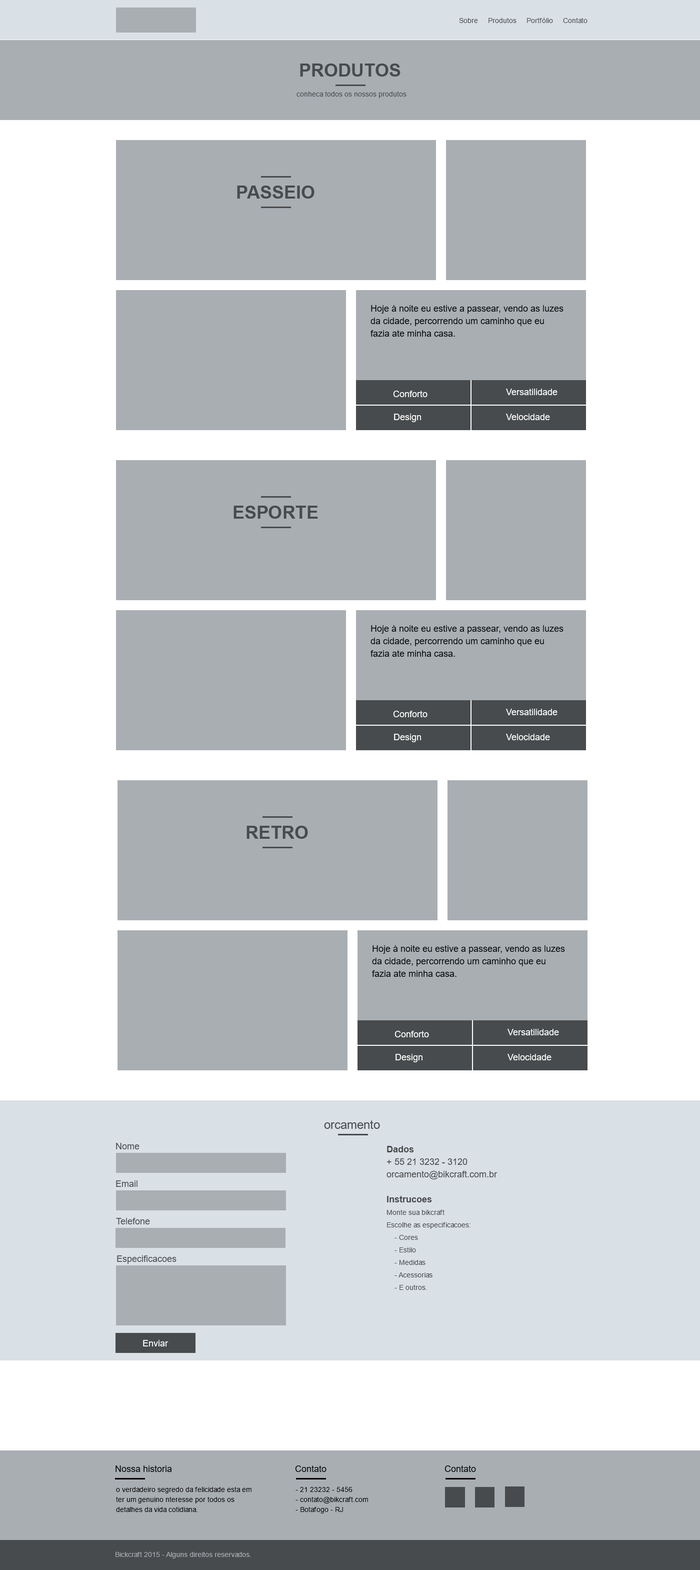
<style>
.page{position:relative;width:700px;height:1570px;background:#a9aeb3}
.page>*{position:absolute;margin:0}
.t1{font:7px "ArialMT";color:#484b4d}
.t2{font:18px "Arial-BoldMT";color:#484b4d;text-transform:uppercase}
.t3{font:9px/12.5px "ArialMT";color:#000204}
.t4{font:9px "ArialMT";color:#ffffff}
.t5{font:12px "ArialMT";color:#484b4d}
.t6{font:9px "ArialMT";color:#484b4d}
.t7{font:7px/12.5px "ArialMT";color:#484b4d}
.t8{font:9px/12.5px "Arial-BoldMT";color:#484b4d}
.t9{font:9px/12.5px "ArialMT";color:#484b4d}
.t10{font:9px "ArialMT";color:#000101}
.t11{font:7px/10px "ArialMT";color:#000000}
.t12{font:7px "ArialMT";color:#a9aeb3}
</style>
<div class="page">
<p class="t1" style="left:459px;top:18px;width:129px;height:5px">Sobre     Produtos     Portfólio     Contato</p>
<p class="t2" style="left:300px;top:64px;width:100px;height:12px">PRODUTOS</p>
<p class="t1" style="left:296px;top:92px;width:110px;height:6px">conheca todos os nossos produtos</p>
<p class="t2" style="left:237px;top:186px;width:77px;height:12px">PASSEIO</p>
<p class="t3" style="left:370px;top:305px;width:194px;height:31px">Hoje à noite eu estive a passear, vendo as luzes da cidade, percorrendo um caminho que eu fazia ate minha casa.</p>
<p class="t4" style="left:506px;top:388px;width:52px;height:7px">Versatilidade</p>
<p class="t4" style="left:393px;top:390px;width:35px;height:7px">Conforto</p>
<p class="t4" style="left:394px;top:414px;width:27px;height:8px">Design</p>
<p class="t4" style="left:506px;top:414px;width:44px;height:6px">Velocidade</p>
<p class="t2" style="left:234px;top:506px;width:84px;height:12px">ESPORTE</p>
<p class="t3" style="left:370px;top:625px;width:194px;height:31px">Hoje à noite eu estive a passear, vendo as luzes da cidade, percorrendo um caminho que eu fazia ate minha casa.</p>
<p class="t4" style="left:393px;top:710px;width:35px;height:7px">Conforto</p>
<p class="t4" style="left:506px;top:708px;width:52px;height:7px">Versatilidade</p>
<p class="t4" style="left:394px;top:734px;width:27px;height:8px">Design</p>
<p class="t4" style="left:506px;top:734px;width:44px;height:6px">Velocidade</p>
<p class="t2" style="left:246px;top:826px;width:62px;height:12px">RETRO</p>
<p class="t3" style="left:372px;top:945px;width:193px;height:31px">Hoje à noite eu estive a passear, vendo as luzes da cidade, percorrendo um caminho que eu fazia ate minha casa.</p>
<p class="t4" style="left:394px;top:1030px;width:35px;height:7px">Conforto</p>
<p class="t4" style="left:508px;top:1028px;width:51px;height:7px">Versatilidade</p>
<p class="t4" style="left:396px;top:1054px;width:26px;height:8px">Design</p>
<p class="t4" style="left:508px;top:1054px;width:44px;height:6px">Velocidade</p>
<p class="t5" style="left:324px;top:1120px;width:56px;height:8px">orcamento</p>
<p class="t6" style="left:116px;top:1142px;width:24px;height:7px">Nome</p>
<p class="t7" style="left:386px;top:1146px;width:112px;height:144px"><span class="t8">Dados<br></span><span class="t9">+ 55 21 3232 - 3120<br>orcamento@bikcraft.com.br<br><br></span><span class="t8">Instrucoes<br></span>Monte sua bikcraft<br>Escolhe as especificacoes:<br>    - Cores<br>    - Estilo<br>    - Medidas<br>    - Acessorias<br>    - E outros.</p>
<p class="t6" style="left:116px;top:1180px;width:22px;height:6px">Email</p>
<p class="t6" style="left:116px;top:1218px;width:34px;height:6px">Telefone</p>
<p class="t6" style="left:117px;top:1255px;width:59px;height:9px">Especificacoes</p>
<p class="t4" style="left:143px;top:1340px;width:25px;height:6px">Enviar</p>
<p class="t10" style="left:116px;top:1465px;width:56px;height:7px">Nossa historia</p>
<p class="t10" style="left:295px;top:1465px;width:31px;height:7px">Contato</p>
<p class="t10" style="left:444px;top:1465px;width:32px;height:7px">Contato</p>
<p class="t11" style="left:116px;top:1486px;width:136px;height:26px">o verdadeiro segredo da felicidade esta em ter um genuino nteresse por todos os detalhes da vida cotidiana.</p>
<p class="t11" style="left:296px;top:1486px;width:72px;height:27px">- 21 23232 - 5456<br>- contato@bikcraft.com<br>- Botafogo - RJ</p>
<p class="t12" style="left:116px;top:1552px;width:135px;height:6px">Bickcraft 2015 - Alguns direitos reservados.</p>
</div>
